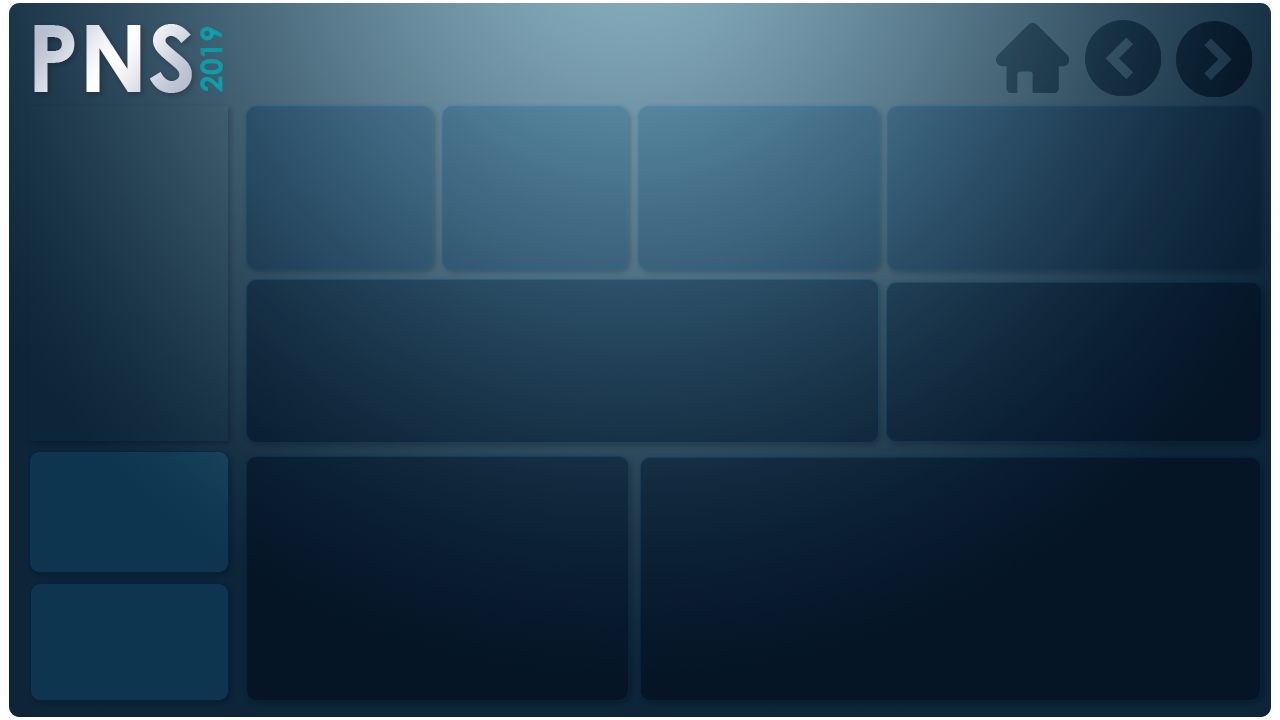
<style>
.page{position:relative;width:1280px;height:720px}
.page>*{position:absolute;margin:0}
.t1{font:92.8px "CenturyGothic-Bold"}
.t2{font:30.1px "CenturyGothic-Bold";color:#00a0b0}
</style>
<div class="page">
<p class="t1" style="left:34px;top:24px;width:158px;height:69px">PNS</p>
<p class="t2" style="left:200px;top:26px;width:23px;height:66px;rotate:-90deg">2019</p>
</div>
